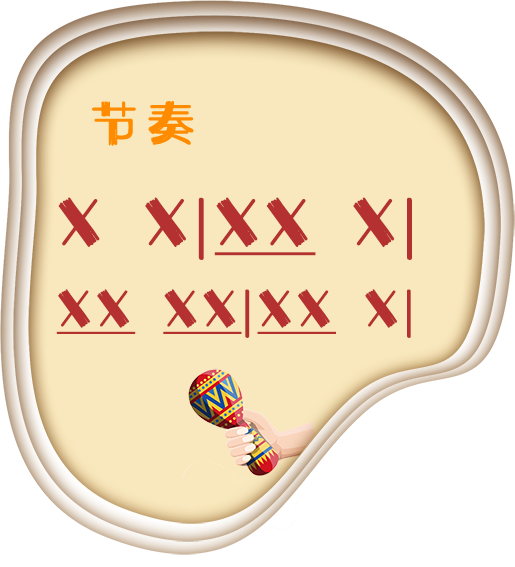
<style>
.page{position:relative;width:515px;height:567px;background:#f9e8bd}
.page>*{position:absolute;margin:0}
.t1{font:47.1px "HYXingQiuTiJ";letter-spacing:0.2em;color:#ff8c00}
.t2{font:60.7px "HYXingQiuTiJ";letter-spacing:0.1em;color:#b53030}
.t3{font:60.7px "HYXingQiuTiJ";letter-spacing:0.1em;color:#b53030;text-decoration:underline}
.t4{font:47.1px "HYXingQiuTiJ";letter-spacing:0.1em;color:#b53030;text-decoration:underline}
.t5{font:47.1px "HYXingQiuTiJ";letter-spacing:0.1em;color:#b53030}
</style>
<div class="page">
<p class="t1" style="left:92px;top:101px;width:102px;height:45px">节奏</p>
<p class="t2" style="left:58px;top:197px;width:354px;height:63px">X X|<span class="t3">XX</span> X|</p>
<p class="t4" style="left:56px;top:289px;width:355px;height:49px">XX XX<span class="t5">|</span>XX<span class="t5"> X|</span></p>
</div>
